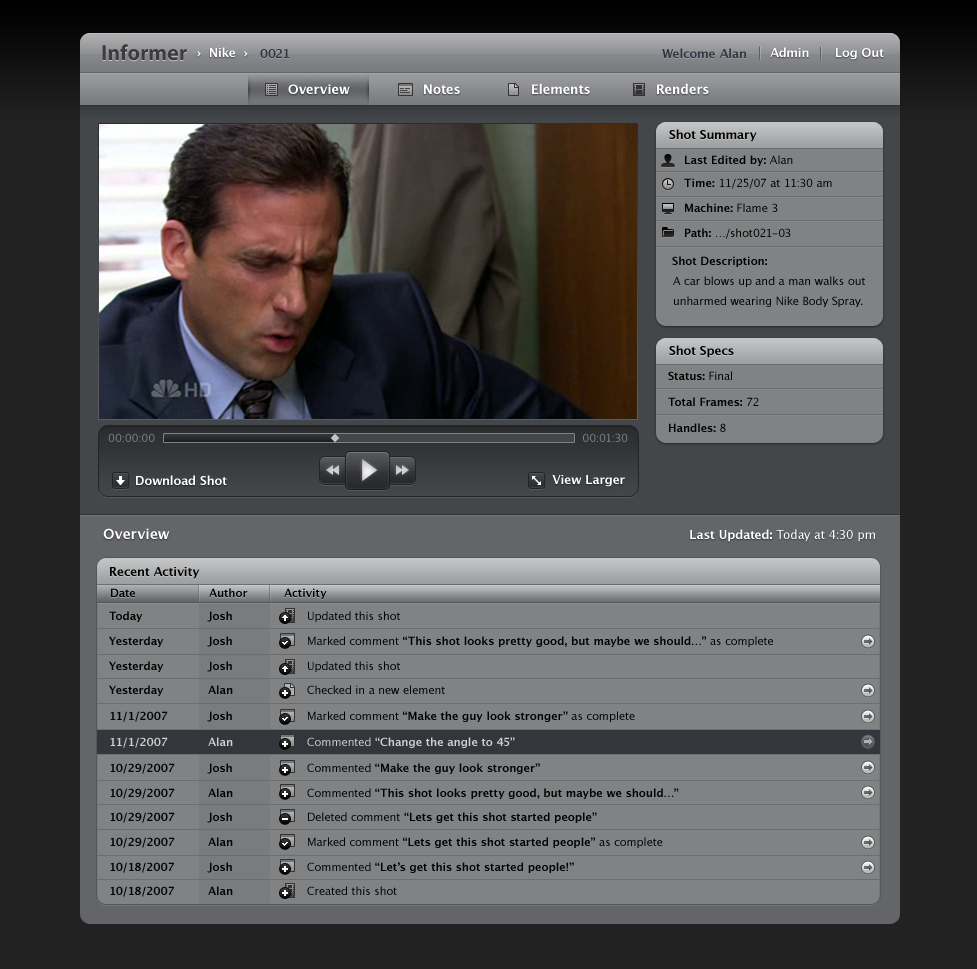
<style>
.page{position:relative;width:977px;height:969px;background:#808284}
.page>*{position:absolute;margin:0}
.t1{font:22px "MyriadPro-Bold";color:#3c3c3c}
.t2{font:12px "LucidaGrande-Bold";color:#ffffff}
.t3{font:12px "LucidaGrande-Bold";color:#303643}
.t4{font:13px "LucidaGrande-Bold";color:#ffffff}
.t5{font:12px "LucidaGrande-Bold";color:#000000}
.t6{font:11px "LucidaGrande-Bold";color:#000000}
.t7{font:11px "LucidaGrande";color:#000000}
.t8{font:11px/19.6px "LucidaGrande";color:#000000}
.t9{font:11px "LucidaGrande";color:#808284}
.t10{font:14px "LucidaGrande-Bold";color:#ffffff}
.t11{font:12px "LucidaGrande";color:#ffffff}
.t12{font:11px "LucidaGrande-Bold";color:#d0d0d0}
.t13{font:11px "LucidaGrande";color:#d0d0d0}
</style>
<div class="page">
<p class="t1" style="left:102px;top:44px;width:85px;height:17px">Informer</p>
<p class="t2" style="left:197px;top:47px;width:51px;height:10px">›  Nike  ›</p>
<p class="t3" style="left:260px;top:49px;width:30px;height:9px">0021</p>
<p class="t3" style="left:662px;top:48px;width:84px;height:10px">Welcome Alan</p>
<p class="t2" style="left:770px;top:47px;width:39px;height:10px">Admin</p>
<p class="t2" style="left:836px;top:48px;width:48px;height:12px">Log Out</p>
<p class="t4" style="left:288px;top:84px;width:62px;height:10px">Overview</p>
<p class="t4" style="left:424px;top:84px;width:36px;height:10px">Notes</p>
<p class="t4" style="left:532px;top:83px;width:58px;height:11px">Elements</p>
<p class="t4" style="left:657px;top:83px;width:52px;height:11px">Renders</p>
<p class="t5" style="left:669px;top:129px;width:88px;height:13px">Shot Summary</p>
<p class="t6" style="left:685px;top:155px;width:108px;height:11px">Last Edited by:<span class="t7"> Alan</span></p>
<p class="t7" style="left:684px;top:178px;width:148px;height:11px"><span class="t6">Time: </span>11/25/07 at 11:30 am</p>
<p class="t6" style="left:685px;top:203px;width:93px;height:9px">Machine: <span class="t7">Flame 3</span></p>
<p class="t7" style="left:685px;top:228px;width:106px;height:11px"><span class="t6">Path: </span>…/shot021-03</p>
<p class="t6" style="left:672px;top:256px;width:95px;height:11px">Shot Description:</p>
<p class="t8" style="left:673px;top:276px;width:192px;height:31px">A car blows up and a man walks out unharmed wearing Nike Body Spray.</p>
<p class="t5" style="left:669px;top:345px;width:65px;height:13px">Shot Specs</p>
<p class="t6" style="left:668px;top:371px;width:64px;height:9px">Status:<span class="t7"> Final</span></p>
<p class="t6" style="left:668px;top:397px;width:91px;height:9px">Total Frames:<span class="t7"> 72</span></p>
<p class="t6" style="left:669px;top:423px;width:57px;height:9px">Handles:<span class="t7"> 8</span></p>
<p class="t9" style="left:108px;top:433px;width:47px;height:9px">00:00:00</p>
<p class="t9" style="left:583px;top:433px;width:45px;height:9px">00:01:30</p>
<p class="t2" style="left:136px;top:475px;width:91px;height:10px">Download Shot</p>
<p class="t2" style="left:552px;top:475px;width:73px;height:12px">View Larger</p>
<p class="t10" style="left:103px;top:528px;width:67px;height:11px">Overview</p>
<p class="t11" style="left:690px;top:529px;width:185px;height:13px"><span class="t2">Last Updated: </span>Today at 4:30 pm</p>
<p class="t5" style="left:110px;top:567px;width:90px;height:12px">Recent Activity</p>
<p class="t6" style="left:111px;top:588px;width:24px;height:9px">Date</p>
<p class="t6" style="left:209px;top:588px;width:39px;height:9px">Author</p>
<p class="t6" style="left:284px;top:588px;width:43px;height:11px">Activity</p>
<p class="t6" style="left:109px;top:611px;width:34px;height:11px">Today</p>
<p class="t6" style="left:207px;top:611px;width:25px;height:11px">Josh</p>
<p class="t7" style="left:308px;top:611px;width:92px;height:11px">Updated this shot</p>
<p class="t6" style="left:109px;top:636px;width:55px;height:11px">Yesterday</p>
<p class="t6" style="left:207px;top:636px;width:25px;height:11px">Josh</p>
<p class="t6" style="left:308px;top:636px;width:465px;height:11px"><span class="t7">Marked comment </span>“This shot looks pretty good, but maybe we should…”<span class="t7"> as complete</span></p>
<p class="t6" style="left:109px;top:661px;width:55px;height:11px">Yesterday</p>
<p class="t6" style="left:207px;top:661px;width:25px;height:11px">Josh</p>
<p class="t7" style="left:308px;top:661px;width:92px;height:11px">Updated this shot</p>
<p class="t6" style="left:109px;top:685px;width:55px;height:11px">Yesterday</p>
<p class="t6" style="left:208px;top:685px;width:25px;height:9px">Alan</p>
<p class="t7" style="left:307px;top:685px;width:138px;height:9px">Checked in a new element</p>
<p class="t6" style="left:110px;top:711px;width:58px;height:11px">11/1/2007</p>
<p class="t6" style="left:207px;top:711px;width:25px;height:11px">Josh</p>
<p class="t6" style="left:308px;top:711px;width:327px;height:11px"><span class="t7">Marked comment </span>“Make the guy look stronger”<span class="t7"> as complete</span></p>
<p class="t12" style="left:110px;top:737px;width:58px;height:11px">11/1/2007</p>
<p class="t12" style="left:208px;top:737px;width:25px;height:9px">Alan</p>
<p class="t12" style="left:307px;top:737px;width:208px;height:11px"><span class="t13">Commented</span> “Change the angle to 45”</p>
<p class="t6" style="left:110px;top:763px;width:65px;height:11px">10/29/2007</p>
<p class="t6" style="left:207px;top:763px;width:25px;height:11px">Josh</p>
<p class="t6" style="left:307px;top:763px;width:233px;height:11px"><span class="t7">Commented </span>“Make the guy look stronger”</p>
<p class="t6" style="left:110px;top:788px;width:65px;height:11px">10/29/2007</p>
<p class="t6" style="left:208px;top:788px;width:25px;height:9px">Alan</p>
<p class="t6" style="left:307px;top:788px;width:372px;height:11px"><span class="t7">Commented </span>“This shot looks pretty good, but maybe we should…”</p>
<p class="t6" style="left:110px;top:812px;width:65px;height:11px">10/29/2007</p>
<p class="t6" style="left:207px;top:812px;width:25px;height:11px">Josh</p>
<p class="t6" style="left:308px;top:812px;width:289px;height:11px"><span class="t7">Deleted comment </span>“Lets get this shot started people”</p>
<p class="t6" style="left:110px;top:837px;width:65px;height:11px">10/29/2007</p>
<p class="t6" style="left:208px;top:837px;width:25px;height:9px">Alan</p>
<p class="t6" style="left:308px;top:837px;width:355px;height:11px"><span class="t7">Marked comment </span>“Lets get this shot started people”<span class="t7"> as complete</span></p>
<p class="t6" style="left:110px;top:862px;width:64px;height:11px">10/18/2007</p>
<p class="t6" style="left:207px;top:862px;width:25px;height:11px">Josh</p>
<p class="t6" style="left:307px;top:862px;width:267px;height:11px"><span class="t7">Commented </span>“Let’s get this shot started people!”</p>
<p class="t6" style="left:110px;top:886px;width:64px;height:11px">10/18/2007</p>
<p class="t6" style="left:208px;top:886px;width:25px;height:9px">Alan</p>
<p class="t7" style="left:307px;top:886px;width:90px;height:9px">Created this shot</p>
</div>
